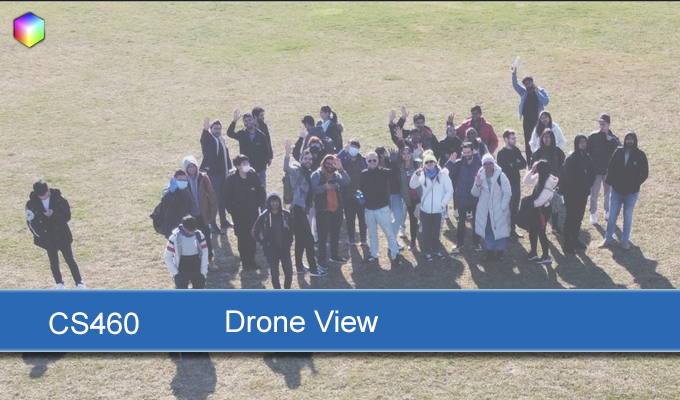
<style>
.page{position:relative;width:680px;height:400px}
.page>*{position:absolute;margin:0}
.t1{font:30px "ArialMT";color:#ffffff}
</style>
<div class="page">
<p class="t1" style="left:49px;top:312px;width:90px;height:23px">CS460</p>
<p class="t1" style="left:226px;top:310px;width:152px;height:23px">Drone View</p>
</div>
